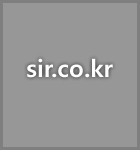
<style>
.page{position:relative;width:140px;height:150px;background:#979797}
.page>*{position:absolute;margin:0}
.t1{font:24px "MalgunGothicBold";color:#fefefe}
</style>
<div class="page">
<p class="t1" style="left:27px;top:58px;width:86px;height:20px">sir.co.kr</p>
</div>
